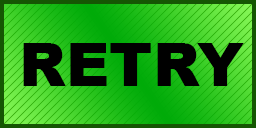
<style>
.page{position:relative;width:256px;height:128px}
.page>*{position:absolute;margin:0}
.t1{font:60px "Arial-Black";color:#000000}
</style>
<div class="page">
<p class="t1" style="left:23px;top:43px;width:221px;height:43px">RETRY</p>
</div>
